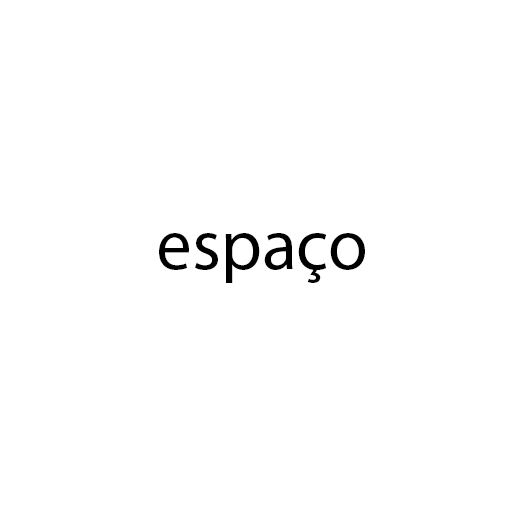
<style>
.page{position:relative;width:512px;height:512px;background:#ffffff}
.page>*{position:absolute;margin:0}
.t1{font:72px "MyriadPro-Regular";color:#000000}
</style>
<div class="page">
<p class="t1" style="left:159px;top:233px;width:206px;height:50px">espaço</p>
</div>
